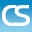
<style>
.page{position:relative;width:32px;height:32px;background:#ffffff}
.page>*{position:absolute;margin:0}
.t1{font:30px "InterGTB";color:#ffffff}
</style>
<div class="page">
<p class="t1" style="left:2px;top:5px;width:15px;height:21px">C</p>
<p class="t1" style="left:14px;top:5px;width:16px;height:21px">S</p>
</div>
